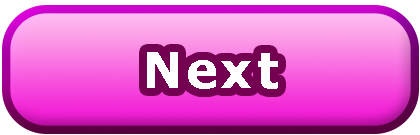
<style>
.page{position:relative;width:420px;height:135px}
.page>*{position:absolute;margin:0}
.t1{font:50px "Tahoma-Bold";letter-spacing:0.1em;color:#ffffff}
</style>
<div class="page">
<p class="t1" style="left:147px;top:52px;width:131px;height:37px">Next</p>
</div>
